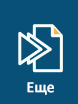
<style>
.page{position:relative;width:78px;height:104px;background:#085078}
.page>*{position:absolute;margin:0}
.t1{font:12px "Calibri-Bold";color:#ffffff}
</style>
<div class="page">
<p class="t1" style="left:27px;top:82px;width:27px;height:13px">Еще</p>
</div>
